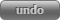
<style>
.page{position:relative;width:60px;height:20px}
.page>*{position:absolute;margin:0}
.t1{font:11px "Tahoma-Bold";color:#c0c2c5}
</style>
<div class="page">
<p class="t1" style="left:16px;top:5px;width:28px;height:9px">undo</p>
</div>
